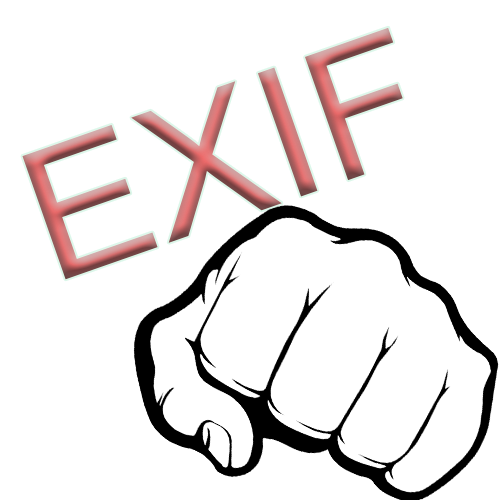
<style>
.page{position:relative;width:500px;height:500px;background:#ffffff}
.page>*{position:absolute;margin:0}
.t1{font:182.3px "ArialMT";letter-spacing:0.01em}
</style>
<div class="page">
<p class="t1" style="left:22px;top:27px;width:381px;height:253px;rotate:-19deg">EXIF</p>
</div>
